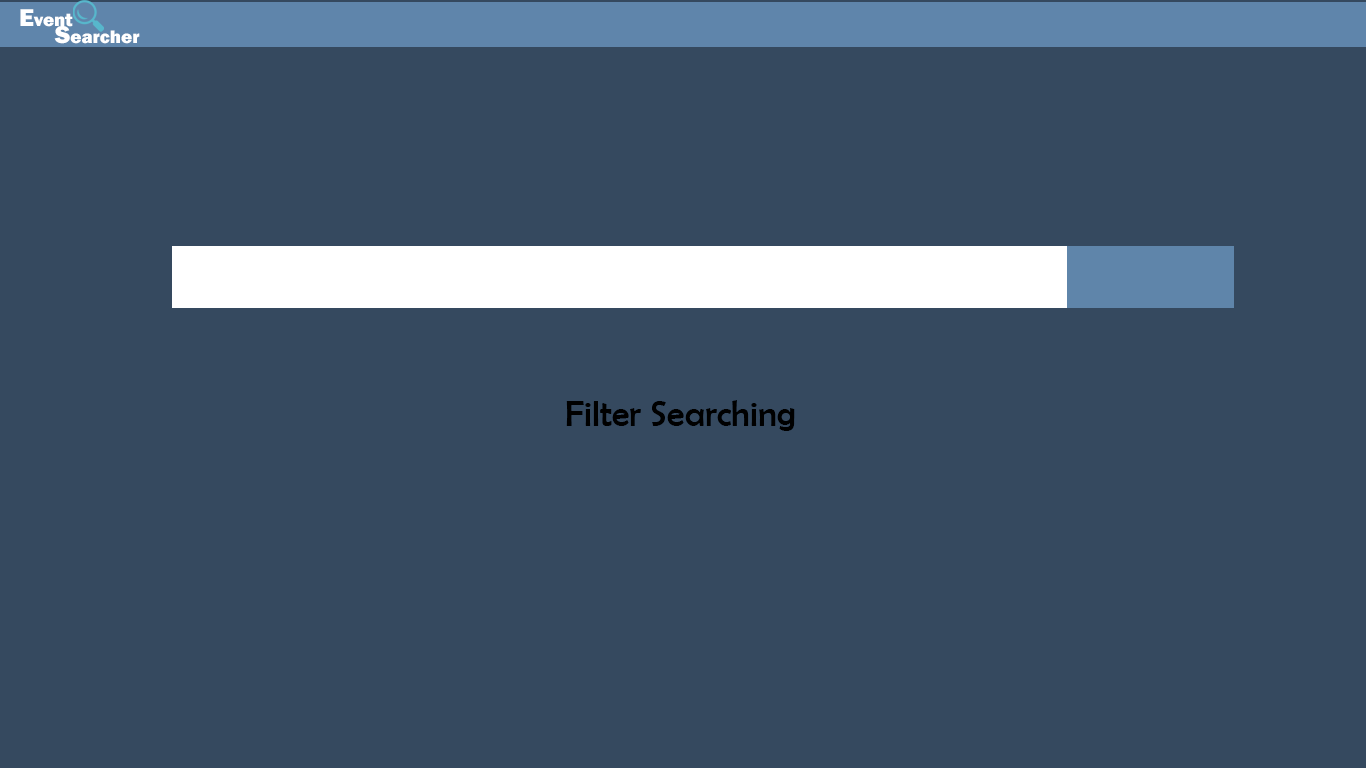
<style>
.page{position:relative;width:1366px;height:768px;background:#35495f}
.page>*{position:absolute;margin:0}
.t1{font:18.8px "FranklinGothic-Heavy";color:#ffffff}
.t2{font:25.1px "FranklinGothic-Heavy";color:#ffffff}
.t3{font:36px "BerlinSansFB-Reg";color:#000000}
</style>
<div class="page">
<p class="t1" style="left:20px;top:9px;width:53px;height:18px"><span class="t2">E</span>vent</p>
<p class="t1" style="left:54px;top:26px;width:86px;height:18px"><span class="t2">S</span>earcher</p>
<p class="t3" style="left:566px;top:400px;width:229px;height:31px">Filter Searching</p>
</div>
